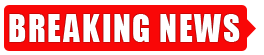
<style>
.page{position:relative;width:264px;height:55px;background:#ffffff}
.page>*{position:absolute;margin:0}
.t1{font:36px "Impact";letter-spacing:0.05em;color:#ffffff;scale:0.92 1}
</style>
<div class="page">
<p class="t1" style="left:9px;top:14px;width:231px;height:28px">BREAKING NEWS</p>
</div>
